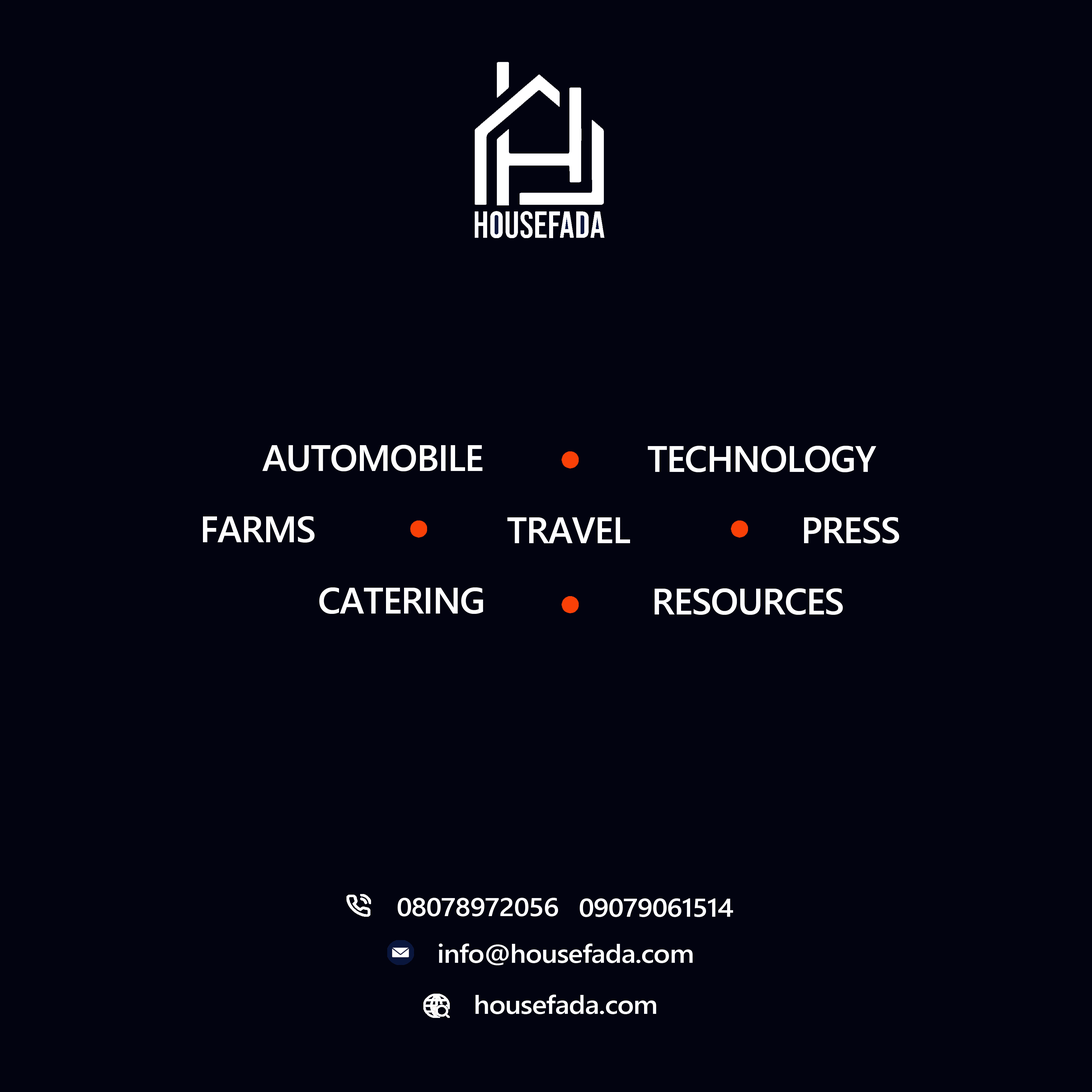
<style>
.page{position:relative;width:1092px;height:1092px;background:#020310}
.page>*{position:absolute;margin:0}
.t1{font:37.1px "SegoeUI-Semibold";letter-spacing:-0.025em;color:#ffffff}
.t2{font:25.9px "SegoeUI-Semibold";letter-spacing:-0.025em;color:#ffffff;scale:1.08 1}
</style>
<div class="page">
<p class="t1" style="left:262px;top:445px;width:220px;height:26px">AUTOMOBILE</p>
<p class="t1" style="left:648px;top:446px;width:228px;height:26px">TECHNOLOGY</p>
<p class="t1" style="left:203px;top:516px;width:112px;height:27px">FARMS</p>
<p class="t1" style="left:507px;top:517px;width:123px;height:27px">TRAVEL</p>
<p class="t1" style="left:804px;top:517px;width:95px;height:27px">PRESS</p>
<p class="t1" style="left:319px;top:587px;width:164px;height:27px">CATERING</p>
<p class="t1" style="left:655px;top:588px;width:188px;height:27px">RESOURCES</p>
<p class="t2" style="left:398px;top:898px;width:160px;height:18px">08078972056</p>
<p class="t2" style="left:580px;top:898px;width:153px;height:19px">09079061514</p>
<p class="t2" style="left:439px;top:944px;width:254px;height:21px">info@housefada.com</p>
<p class="t2" style="left:475px;top:995px;width:181px;height:19px">housefada.com</p>
</div>
